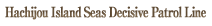
<style>
.page{position:relative;width:212px;height:26px;background:#ffffff}
.page>*{position:absolute;margin:0}
.t1{font:14px "RyuminPro-ExBold";letter-spacing:-0.08em;color:#69553d;font-weight:bold;scale:0.8 1}
</style>
<div class="page">
<p class="t1" style="left:5px;top:6px;width:201px;height:14px">Hachijou Island Seas Decisive Patrol Line</p>
</div>
